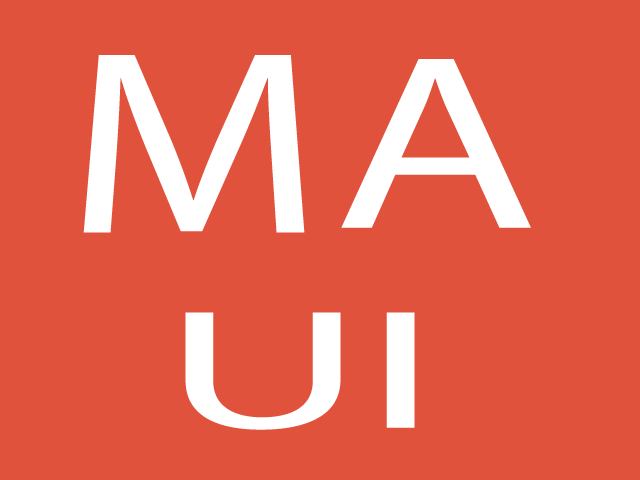
<style>
.page{position:relative;width:640px;height:480px;background:#e1523d}
.page>*{position:absolute;margin:0}
.t1{font:262.8px "MyriadPro-Regular";color:#ffffff;scale:1.22 1}
.t2{font:249.9px "MyriadPro-Regular";color:#ffffff;scale:1.34 1}
.t3{font:170.7px "MyriadPro-Regular";color:#ffffff;scale:1.82 1}
</style>
<div class="page">
<p class="t1" style="left:83px;top:55px;width:222px;height:178px">M</p>
<p class="t2" style="left:341px;top:59px;width:190px;height:169px">A</p>
<p class="t3" style="left:185px;top:312px;width:230px;height:118px">UI</p>
</div>
